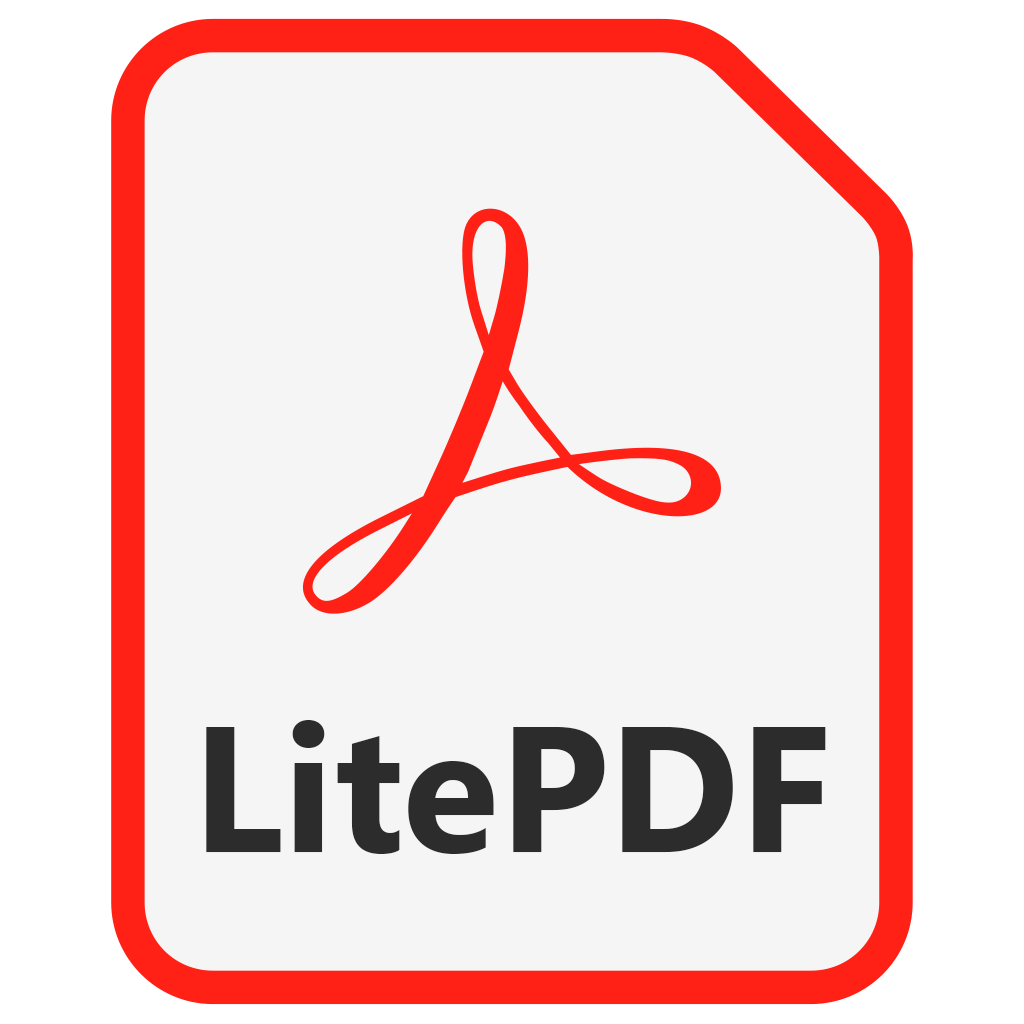
<style>
.page{position:relative;width:1024px;height:1024px;background:#f5f5f5}
.page>*{position:absolute;margin:0}
.t1{font:178px "SegoeUI-Bold";color:#2c2c2c}
</style>
<div class="page">
<p class="t1" style="left:206px;top:720px;width:620px;height:134px">LitePDF</p>
</div>
